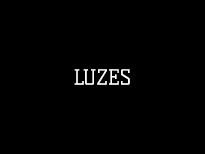
<style>
.page{position:relative;width:205px;height:154px;background:#000000}
.page>*{position:absolute;margin:0}
.t1{font:20.8px "KellySlab-Regular";color:#ffffff}
</style>
<div class="page">
<p class="t1" style="left:74px;top:69px;width:56px;height:16px">LUZES</p>
</div>
